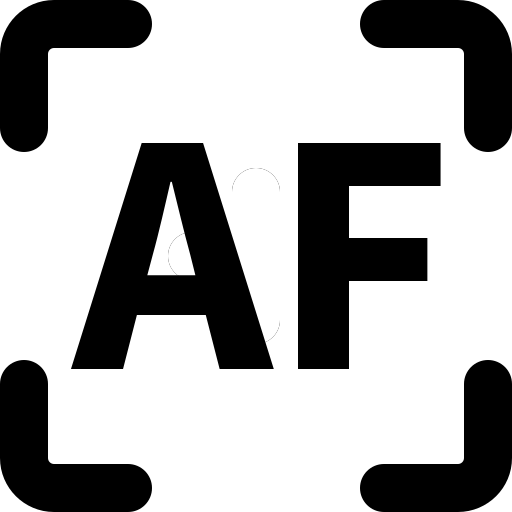
<style>
.page{position:relative;width:512px;height:512px;background:#ffffff}
.page>*{position:absolute;margin:0}
.t1{font:346.7px "SourceSansPro-Bold";color:#000000}
</style>
<div class="page">
<p class="t1" style="left:71px;top:143px;width:370px;height:226px">AF</p>
</div>
